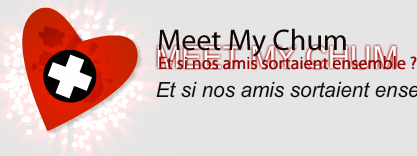
<style>
.page{position:relative;width:417px;height:156px;background:#e5e5e5}
.page>*{position:absolute;margin:0}
.t1{font:30px "MyriadPro-Regular";color:#120606}
.t2{font:18px "MyriadPro-Regular";color:#910606}
</style>
<div class="page">
<p class="t1" style="left:158px;top:28px;width:188px;height:29px">Meet My Chum</p>
<p class="t2" style="left:159px;top:56px;width:258px;height:14px">Et si nos amis sortaient ensemble ?</p>
</div>
